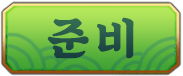
<style>
.page{position:relative;width:183px;height:76px}
.page>*{position:absolute;margin:0}
.t1{font:46.1px "SDKukdetopokki-bBd";letter-spacing:0.12em;color:#265549}
</style>
<div class="page">
<p class="t1" style="left:47px;top:17px;width:87px;height:42px">준비</p>
</div>
